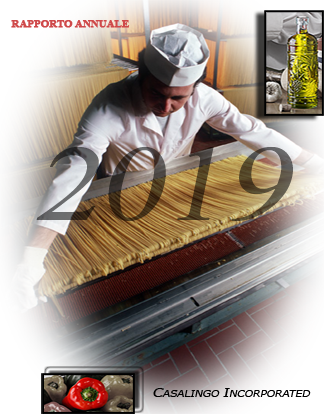
<style>
.page{position:relative;width:324px;height:414px}
.page>*{position:absolute;margin:0}
.t1{font:9.1px "TimesNewRomanPS-BoldMT";color:#cf494a;font-weight:bold;scale:1.17 1}
.t2{font:108.8px "TimesNewRomanPSMT";font-style:italic;scale:1.17 1}
.t3{font:9.1px "Verdana";color:#000000;font-style:italic;scale:1.17 1}
.t4{font:12.7px "Verdana";color:#000000;font-style:italic;scale:1.17 1}
</style>
<div class="page">
<p class="t1" style="left:11px;top:20px;width:119px;height:8px">RAPPORTO ANNUALE</p>
<p class="t2" style="left:36px;top:147px;width:257px;height:74px">2019</p>
<p class="t3" style="left:153px;top:388px;width:158px;height:9px"><span class="t4">C</span>ASALINGO <span class="t4">I</span>NCORPORATED</p>
</div>
